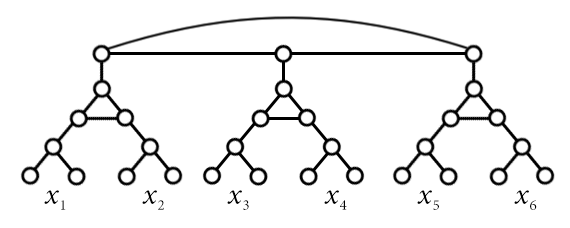
<style>
.page{position:relative;width:570px;height:228px;background:#ffffff}
.page>*{position:absolute;margin:0}
.t1{font:30px "MinionPro-It";color:#000000}
.t2{font:15px "MinionPro-Regular"}
.t3{font:15px "MinionPro-Regular";color:#000000}
</style>
<div class="page">
<p class="t1" style="left:44px;top:190px;width:15px;height:14px">x</p>
<p class="t1" style="left:142px;top:190px;width:15px;height:14px">x</p>
<p class="t1" style="left:227px;top:190px;width:15px;height:14px">x</p>
<p class="t1" style="left:324px;top:190px;width:15px;height:14px">x</p>
<p class="t1" style="left:417px;top:190px;width:15px;height:14px">x</p>
<p class="t1" style="left:514px;top:190px;width:15px;height:14px">x</p>
<p class="t2" style="left:61px;top:200px;width:5px;height:10px">1</p>
<p class="t3" style="left:158px;top:200px;width:6px;height:10px">2</p>
<p class="t3" style="left:243px;top:200px;width:6px;height:10px">3</p>
<p class="t3" style="left:340px;top:200px;width:7px;height:10px">4</p>
<p class="t3" style="left:433px;top:200px;width:6px;height:10px">5</p>
<p class="t3" style="left:530px;top:200px;width:7px;height:10px">6</p>
</div>
